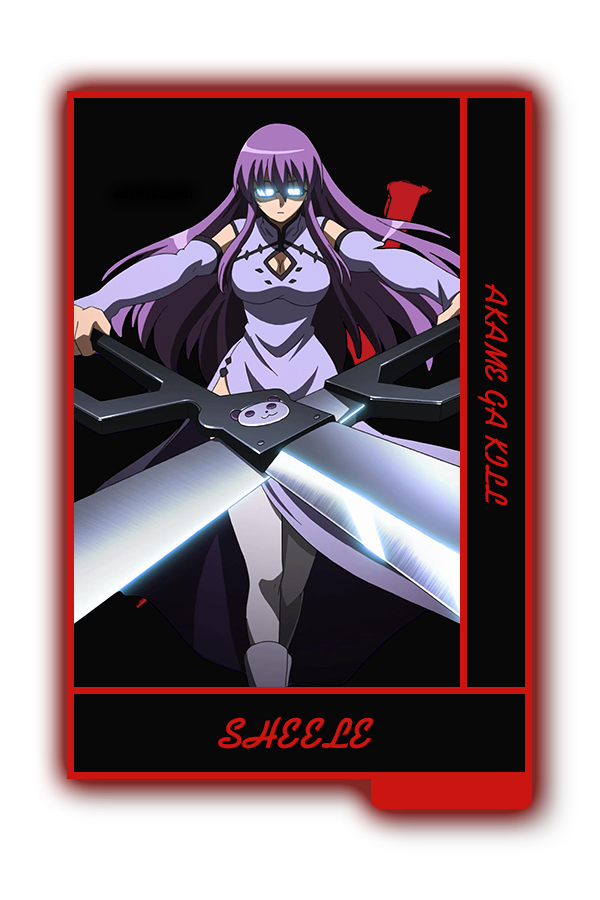
<style>
.page{position:relative;width:600px;height:900px;background:#080808}
.page>*{position:absolute;margin:0}
.t1{font:31.2px "Alako-Bold";color:#cb1511}
.t2{font:43.2px "Alako-Bold";color:#cb1511}
</style>
<div class="page">
<p class="t1" style="left:477px;top:283px;width:31px;height:223px;rotate:90deg">AKAME GA KILL</p>
<p class="t2" style="left:218px;top:716px;width:156px;height:33px">SHEELE</p>
</div>
